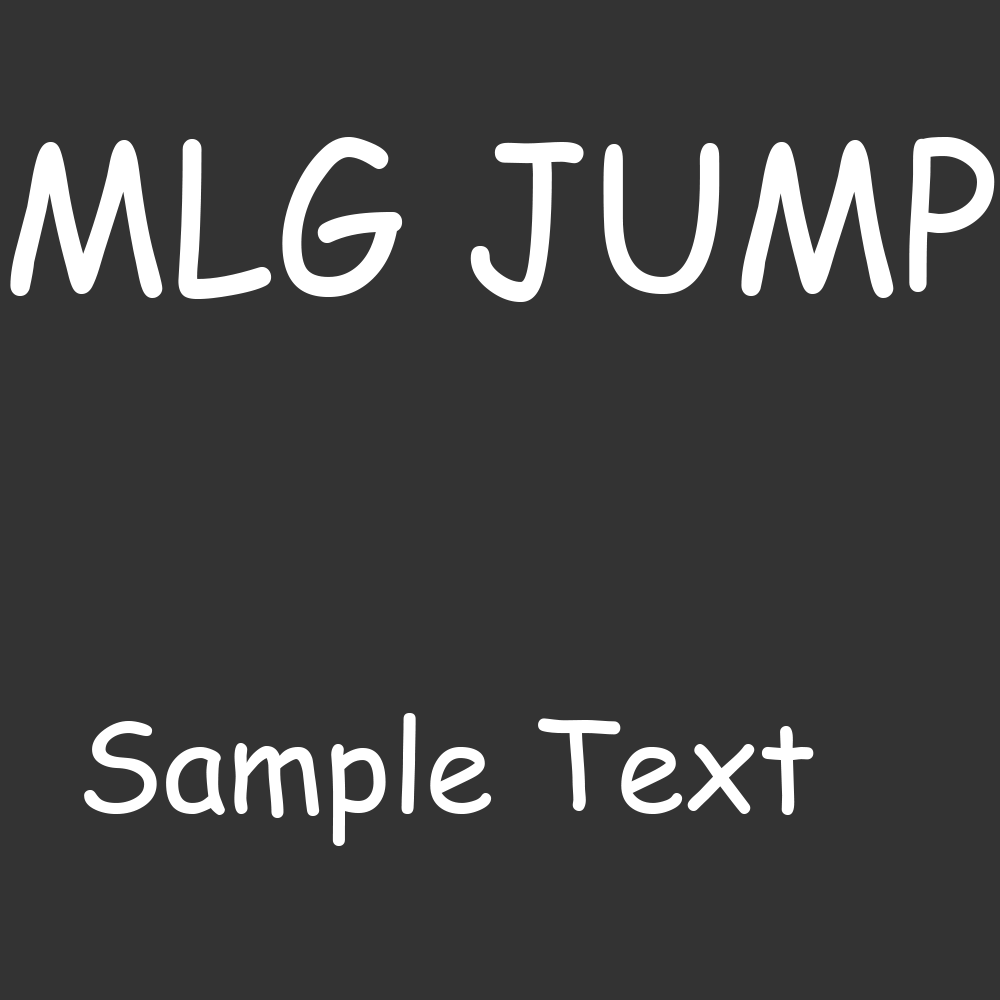
<style>
.page{position:relative;width:1000px;height:1000px;background:#333333}
.page>*{position:absolute;margin:0}
.t1{font:200px "ComicSansMS";color:#ffffff;scale:0.96 1}
.t2{font:125px "ComicSansMS";color:#ffffff}
</style>
<div class="page">
<p class="t1" style="left:10px;top:137px;width:985px;height:165px">MLG JUMP</p>
<p class="t2" style="left:84px;top:713px;width:730px;height:133px">Sample Text</p>
</div>
